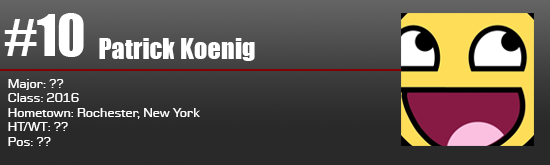
<style>
.page{position:relative;width:550px;height:165px}
.page>*{position:absolute;margin:0}
.t1{font:52.8px "Impact";color:#ffffff}
.t2{font:26.4px "Impact";color:#ffffff}
.t3{font:12px "Moire";color:#ffffff}
</style>
<div class="page">
<p class="t1" style="left:4px;top:13px;width:80px;height:44px">#10</p>
<p class="t2" style="left:99px;top:38px;width:156px;height:23px">Patrick Koenig</p>
<p class="t3" style="left:8px;top:79px;width:192px;height:67px">Major: ??<br>Class: 2016<br>Hometown: Rochester, New York<br>HT/WT: ??<br>Pos: ??</p>
</div>
